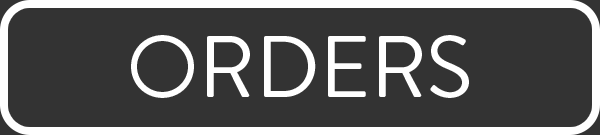
<style>
.page{position:relative;width:600px;height:135px;background:#333333}
.page>*{position:absolute;margin:0}
.t1{font:87.2px "BrandonGrotesque-Regular";letter-spacing:-0.01em;color:#ffffff}
</style>
<div class="page">
<p class="t1" style="left:131px;top:35px;width:338px;height:63px">ORDERS</p>
</div>
